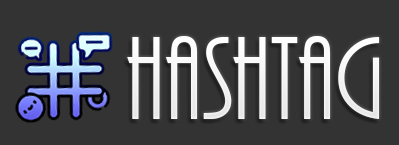
<style>
.page{position:relative;width:399px;height:145px;background:#333333}
.page>*{position:absolute;margin:0}
.t1{font:123.1px "ARBONNIE";color:#ffffff}
</style>
<div class="page">
<p class="t1" style="left:127px;top:36px;width:253px;height:83px">Hashtag</p>
</div>
